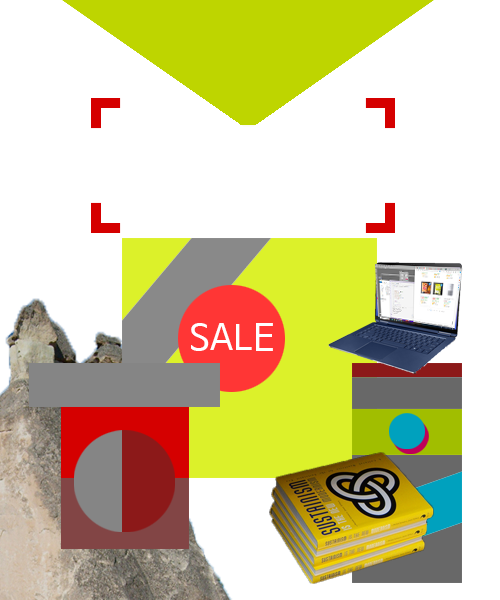
<style>
.page{position:relative;width:500px;height:600px;background:#ffffff}
.page>*{position:absolute;margin:0}
.t1{font:35.4px "NanumBarunGothic";color:#ffffff}
</style>
<div class="page">
<p class="t1" style="left:191px;top:323px;width:82px;height:28px">SALE</p>
</div>
